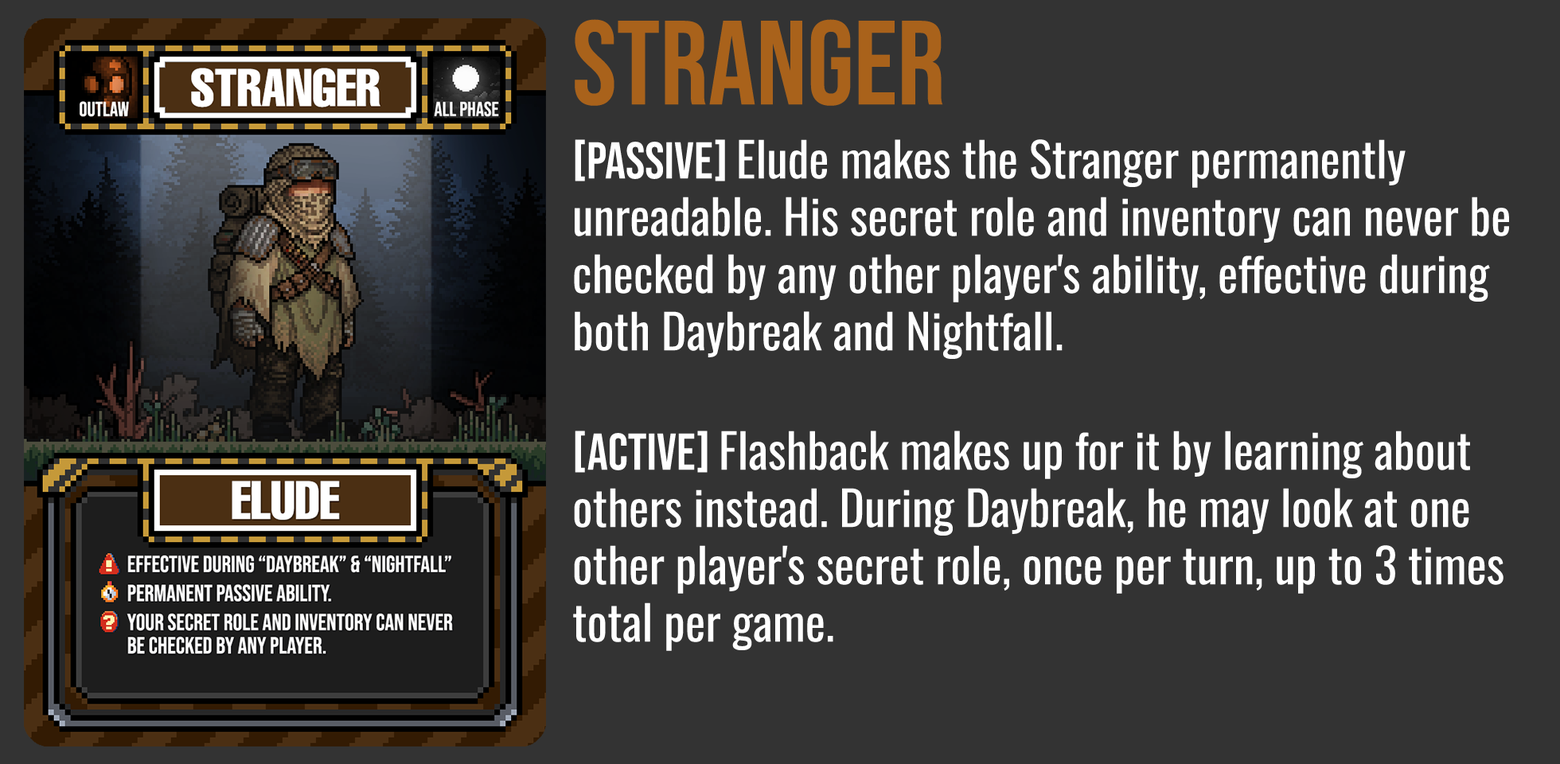
<style>
.page{position:relative;width:1560px;height:764px;background:#333333}
.page>*{position:absolute;margin:0}
.t1{font:119.4px "BebasNeue-Regular";color:#a9621b}
.t2{font:47.8px "Oswald-Regular";color:#ffffff}
.t3{font:51.7px "BebasNeue-Regular";color:#ffffff}
</style>
<div class="page">
<p class="t1" style="left:575px;top:19px;width:368px;height:87px">STRANGER</p>
<p class="t2" style="left:573px;top:139px;width:936px;height:512px"><span class="t3">[PASSIVE] </span>Elude makes the Stranger permanently unreadable. His secret role and inventory can never be checked by any other player's ability, effective during both Daybreak and Nightfall.<br><br><span class="t3">[ACTIVE] </span>Flashback makes up for it by learning about others instead. During Daybreak, he may look at one other player's secret role, once per turn, up to 3 times total per game.</p>
</div>
